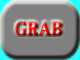
<style>
.page{position:relative;width:80px;height:60px;background:#808080}
.page>*{position:absolute;margin:0}
.t1{font:18px "MyungjoXB-HM"}
</style>
<div class="page">
<p class="t1" style="left:15px;top:21px;width:47px;height:14px">GRAB</p>
</div>
